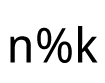
<style>
.page{position:relative;width:105px;height:83px;background:#ffffff}
.page>*{position:absolute;margin:0}
.t1{font:47.9px "DroidSans";color:#000000}
</style>
<div class="page">
<p class="t1" style="left:10px;top:26px;width:88px;height:37px">n%k</p>
</div>
